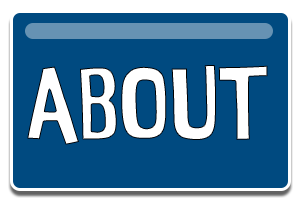
<style>
.page{position:relative;width:300px;height:200px;background:#004a80}
.page>*{position:absolute;margin:0}
.t1{font:106px "InsideOut";color:#ffffff}
</style>
<div class="page">
<p class="t1" style="left:27px;top:65px;width:241px;height:80px">about</p>
</div>
